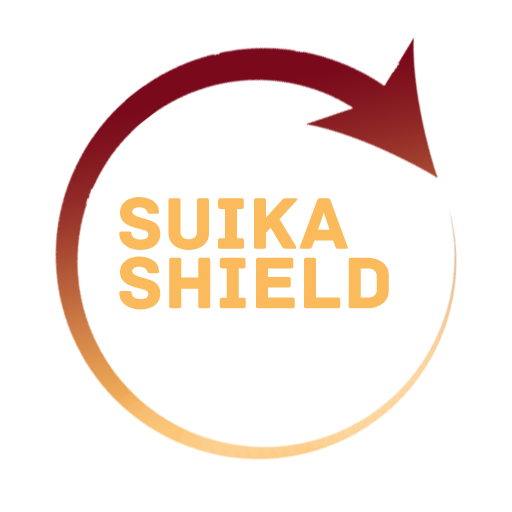
<style>
.page{position:relative;width:512px;height:512px;background:#ffffff}
.page>*{position:absolute;margin:0}
.t1{font:76.7px/59.7px "Archive-Regular";color:#fbbb5d}
</style>
<div class="page">
<p class="t1" style="left:119px;top:197px;width:270px;height:113px">Suika<br>Shield</p>
</div>
